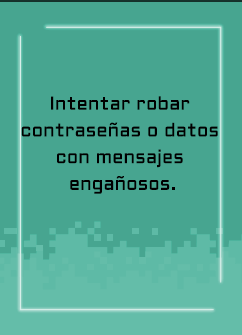
<style>
.page{position:relative;width:242px;height:335px;background:#47a590}
.page>*{position:absolute;margin:0}
.t1{font:18.7px/26.7px "Aldrich-Regular";letter-spacing:0.005em;color:#000000}
</style>
<div class="page">
<p class="t1" style="left:21px;top:96px;width:197px;height:98px;text-align:center">Intentar robar <br>contraseñas o datos <br>con mensajes <br>engañosos.</p>
</div>
